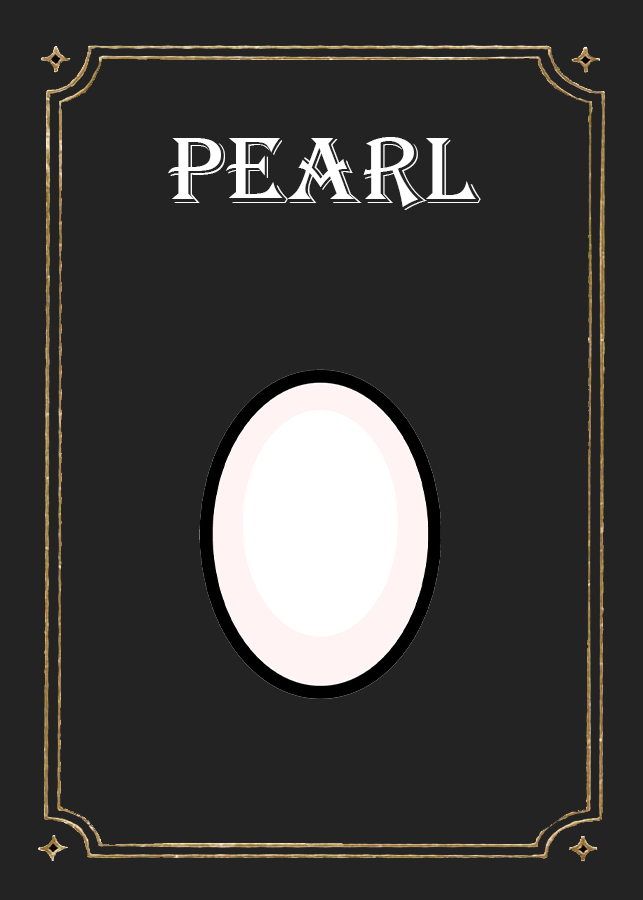
<style>
.page{position:relative;width:643px;height:900px;background:#232323}
.page>*{position:absolute;margin:0}
.t1{font:98.3px "Algerian";color:#ffffff}
</style>
<div class="page">
<p class="t1" style="left:168px;top:137px;width:313px;height:73px">Pearl</p>
</div>
